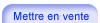
<style>
.page{position:relative;width:100px;height:23px;background:#e1e4fc}
.page>*{position:absolute;margin:0}
.t1{font:11px "ArialMT";color:#092ff6}
</style>
<div class="page">
<p class="t1" style="left:14px;top:12px;width:75px;height:8px">Mettre en vente</p>
</div>
